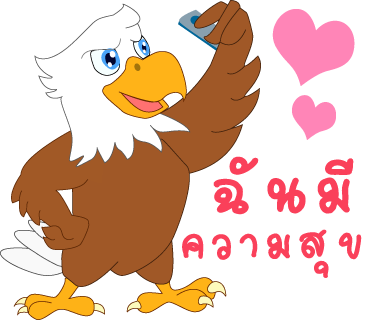
<style>
.page{position:relative;width:370px;height:320px;background:#ffffff}
.page>*{position:absolute;margin:0}
.t1{font:97px "2005_iannnnnMTV";letter-spacing:0.075em;color:#fa405a;scale:1.06 1}
.t2{font:69px "2005_iannnnnMTV";letter-spacing:0.075em;color:#fa405a;scale:1.06 1}
</style>
<div class="page">
<p class="t1" style="left:213px;top:156px;width:141px;height:59px">ฉันมี</p>
<p class="t2" style="left:182px;top:229px;width:180px;height:49px">ความสุข</p>
</div>
